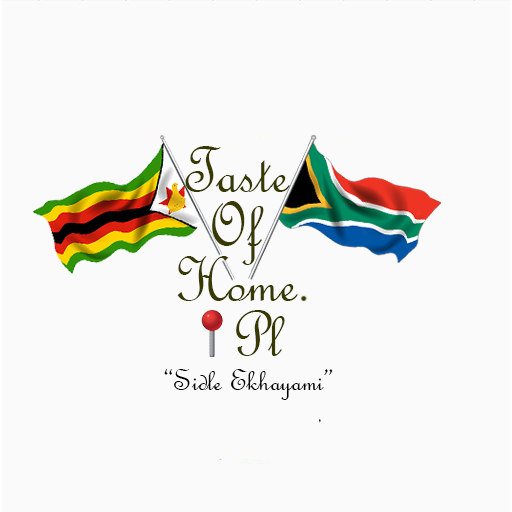
<style>
.page{position:relative;width:512px;height:512px;background:#fafafa}
.page>*{position:absolute;margin:0}
.t1{font:66.7px "FrenchScriptMT";color:#373900}
.t2{font:32px "FrenchScriptMT";color:#000000}
</style>
<div class="page">
<p class="t1" style="left:185px;top:146px;width:105px;height:46px">Taste</p>
<p class="t1" style="left:212px;top:201px;width:52px;height:64px">Of</p>
<p class="t1" style="left:177px;top:256px;width:121px;height:45px">Home</p>
<p class="t1" style="left:236px;top:310px;width:49px;height:46px">Pl</p>
<p class="t2" style="left:164px;top:369px;width:169px;height:31px">“Sidle Ekhayami”</p>
</div>
